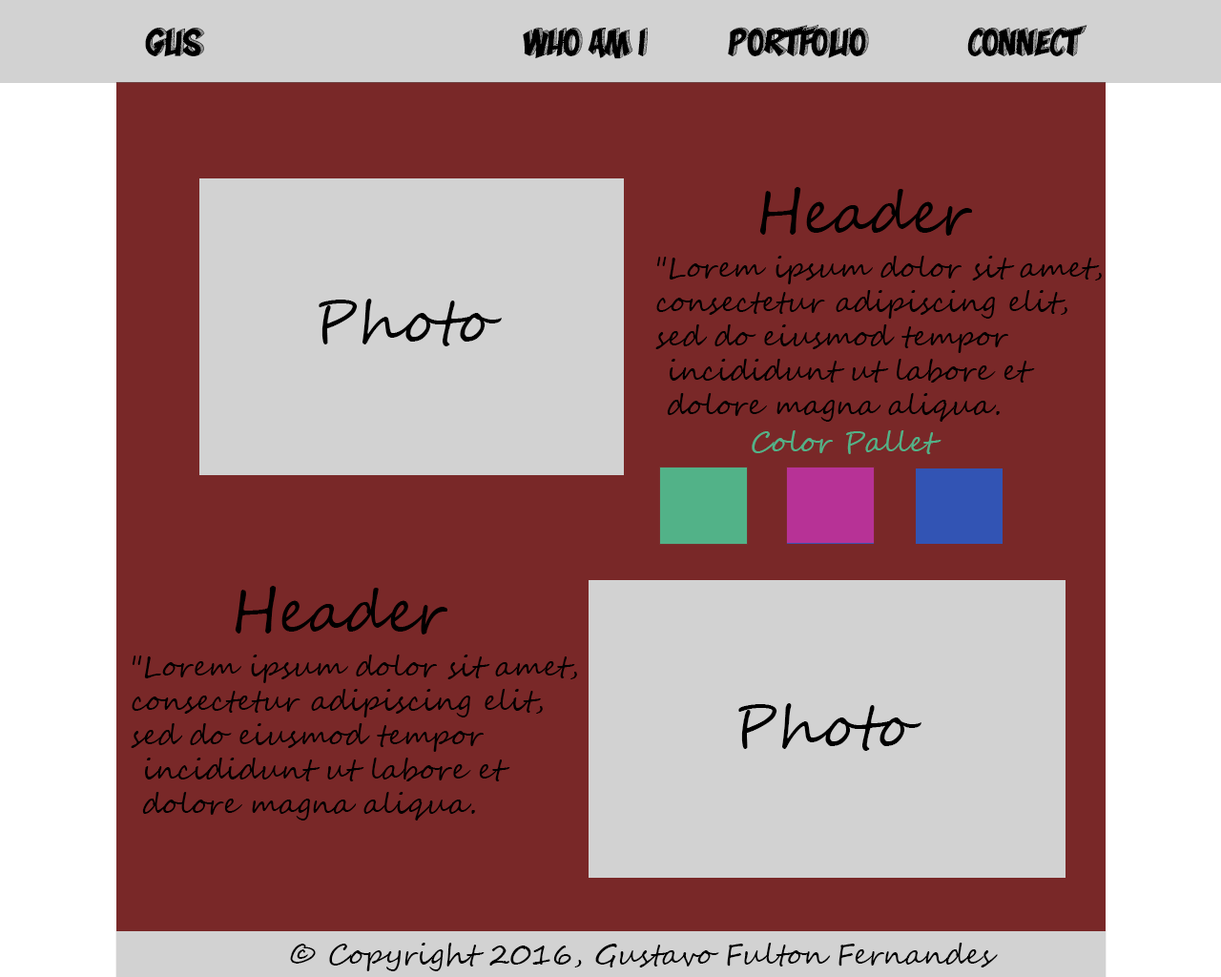
<style>
.page{position:relative;width:1221px;height:977px;background:#792828}
.page>*{position:absolute;margin:0}
.t1{font:34.3px "MonaShark";color:#000000}
.t2{font:57.2px "SegoeScript";color:#000000}
.t3{font:28.6px "SegoeScript";color:#000000}
.t4{font:28.6px "SegoeScript";color:#52b288}
</style>
<div class="page">
<p class="t1" style="left:145px;top:28px;width:60px;height:29px">Gus</p>
<p class="t1" style="left:523px;top:24px;width:564px;height:35px">Who am I   Portfolio   Connect</p>
<p class="t2" style="left:759px;top:187px;width:213px;height:49px">Header</p>
<p class="t3" style="left:655px;top:256px;width:447px;height:166px">"Lorem ipsum dolor sit amet,<br>consectetur adipiscing elit, <br>sed do eiusmod tempor<br> incididunt ut labore et<br> dolore magna aliqua.</p>
<p class="t2" style="left:319px;top:299px;width:183px;height:47px">Photo</p>
<p class="t4" style="left:752px;top:430px;width:189px;height:24px">Color Pallet</p>
<p class="t2" style="left:235px;top:586px;width:212px;height:48px">Header</p>
<p class="t3" style="left:131px;top:654px;width:446px;height:166px">"Lorem ipsum dolor sit amet,<br>consectetur adipiscing elit, <br>sed do eiusmod tempor<br> incididunt ut labore et<br> dolore magna aliqua.</p>
<p class="t2" style="left:738px;top:703px;width:183px;height:48px">Photo</p>
<p class="t3" style="left:290px;top:942px;width:708px;height:29px">© Copyright 2016, Gustavo Fulton Fernandes</p>
</div>
